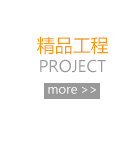
<style>
.page{position:relative;width:140px;height:150px;background:#ffffff}
.page>*{position:absolute;margin:0}
.t1{font:18px "MicrosoftYaHei";color:#ff9900}
.t2{font:16px "MicrosoftJhengHeiRegular";color:#999999}
.t3{font:12px "MicrosoftJhengHeiRegular";color:#ffffff}
</style>
<div class="page">
<p class="t1" style="left:37px;top:36px;width:72px;height:19px">精品工程</p>
<p class="t2" style="left:40px;top:59px;width:66px;height:14px">PROJECT</p>
<p class="t3" style="left:48px;top:86px;width:49px;height:8px">more &gt;&gt;</p>
</div>
